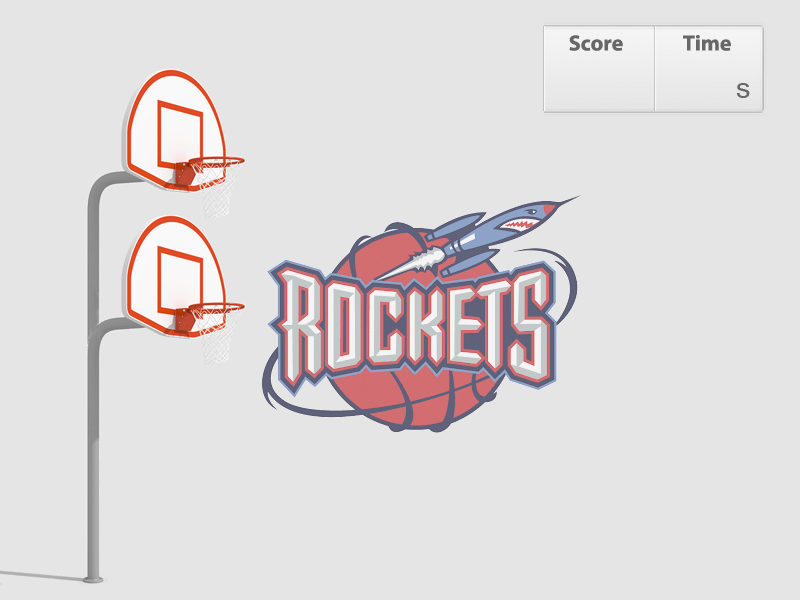
<style>
.page{position:relative;width:800px;height:600px;background:#e5e5e5}
.page>*{position:absolute;margin:0}
.t1{font:22px "MyriadPro-Bold";color:#676767}
.t2{font:27.5px "Mangal";color:#676767}
</style>
<div class="page">
<p class="t1" style="left:569px;top:35px;width:54px;height:16px">Score</p>
<p class="t1" style="left:683px;top:35px;width:48px;height:16px">Time</p>
<p class="t2" style="left:736px;top:83px;width:14px;height:15px">s</p>
</div>
